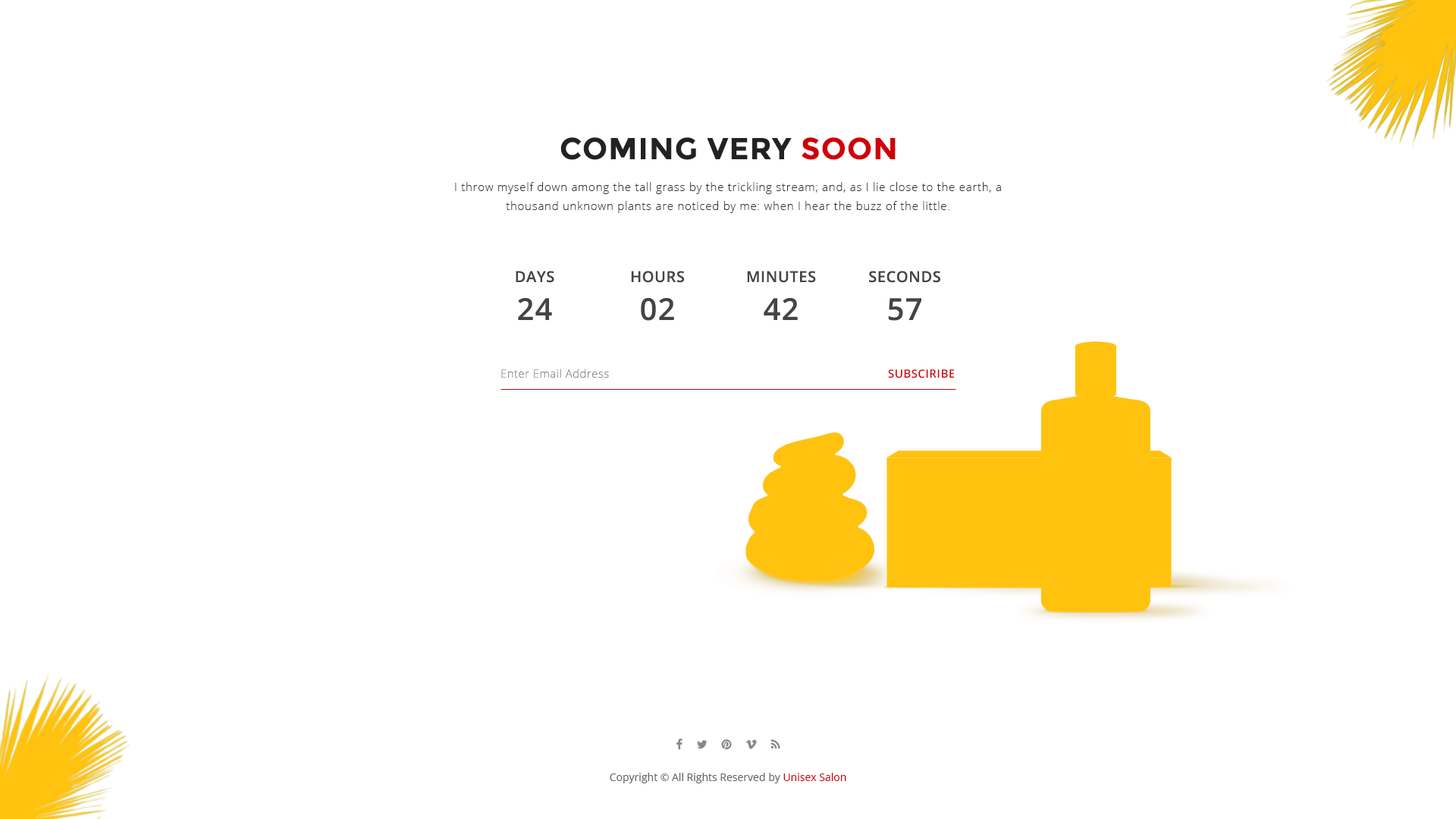
<style>
.page{position:relative;width:1456px;height:819px;background:#ffffff}
.page>*{position:absolute;margin:0}
.t1{font:30.3px "Montserrat-Bold";letter-spacing:0.03em;color:#222222;text-transform:uppercase}
.t2{font:30.3px "Montserrat-Bold";letter-spacing:0.03em;color:#d00009;text-transform:uppercase}
.t3{font:11.4px/19px "OpenSans-Light";letter-spacing:0.05em;color:#333333}
.t4{font:15.2px/37.9px "OpenSans-Semibold";letter-spacing:0.03em;color:#444444;text-transform:uppercase}
.t5{font:30.3px/37.9px "OpenSans-Semibold";letter-spacing:0.03em;color:#444444}
.t6{font:11.4px "OpenSans-Light";letter-spacing:0.03em;color:#888888}
.t7{font:11.4px "OpenSans-Semibold";letter-spacing:0.03em;color:#d00009;text-transform:uppercase}
.t8{font:10.6px "OpenSans";color:#666666}
.t9{font:10.6px "OpenSans";color:#d00009}
</style>
<div class="page">
<p class="t1" style="left:560px;top:137px;width:336px;height:23px">coming very <span class="t2">soon</span></p>
<p class="t3" style="left:455px;top:182px;width:546px;height:31px;text-align:center">I throw myself down among the tall grass by the trickling stream; and, as I lie close to the earth, a thousand unknown plants are noticed by me: when I hear the buzz of the little.</p>
<p class="t4" style="left:516px;top:271px;width:38px;height:49px;text-align:center">Days<br><span class="t5">24</span></p>
<p class="t4" style="left:631px;top:271px;width:54px;height:50px;text-align:center">hours<br><span class="t5">02</span></p>
<p class="t4" style="left:747px;top:271px;width:69px;height:49px;text-align:center">minutes<br><span class="t5">42</span></p>
<p class="t4" style="left:869px;top:271px;width:71px;height:50px;text-align:center">seconds<br><span class="t5">57</span></p>
<p class="t6" style="left:501px;top:369px;width:108px;height:9px">Enter Email Address</p>
<p class="t7" style="left:888px;top:369px;width:66px;height:9px">Subsciribe</p>
<p class="t8" style="left:610px;top:773px;width:236px;height:10px">Copyright © All Rights Reserved by <span class="t9">Unisex Salon</span></p>
</div>
